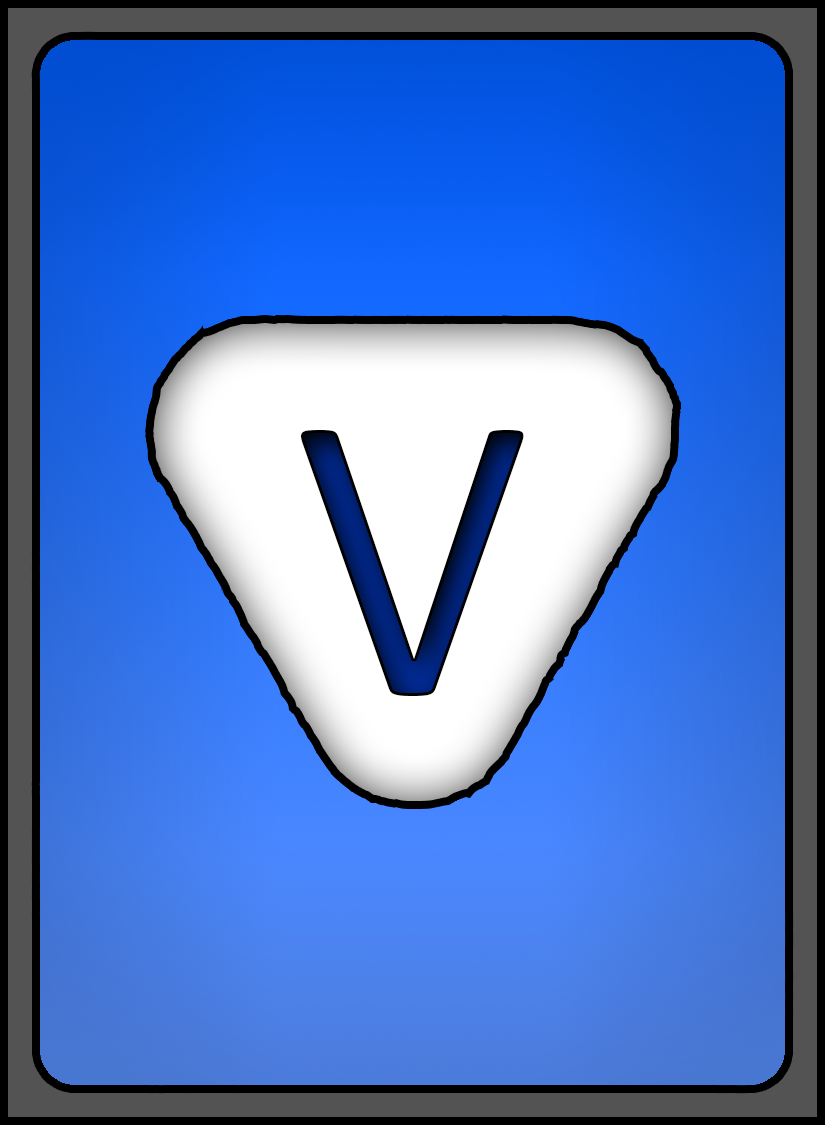
<style>
.page{position:relative;width:825px;height:1125px}
.page>*{position:absolute;margin:0}
.t1{font:416.7px "Calibri"}
</style>
<div class="page">
<p class="t1" style="left:301px;top:430px;width:223px;height:266px">V</p>
</div>
